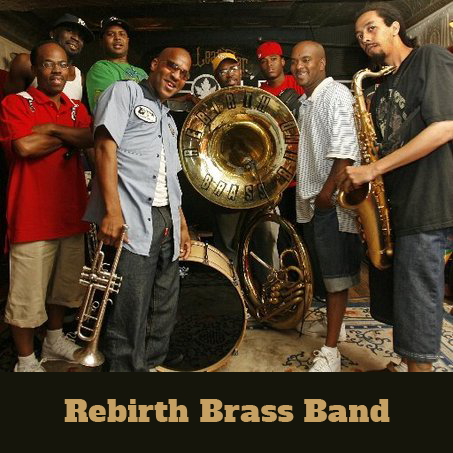
<style>
.page{position:relative;width:453px;height:453px}
.page>*{position:absolute;margin:0}
.t1{font:30px "AlfaSlabOne-Regular";letter-spacing:0.018em;color:#c6a062}
</style>
<div class="page">
<p class="t1" style="left:64px;top:399px;width:326px;height:23px">Rebirth Brass Band</p>
</div>
